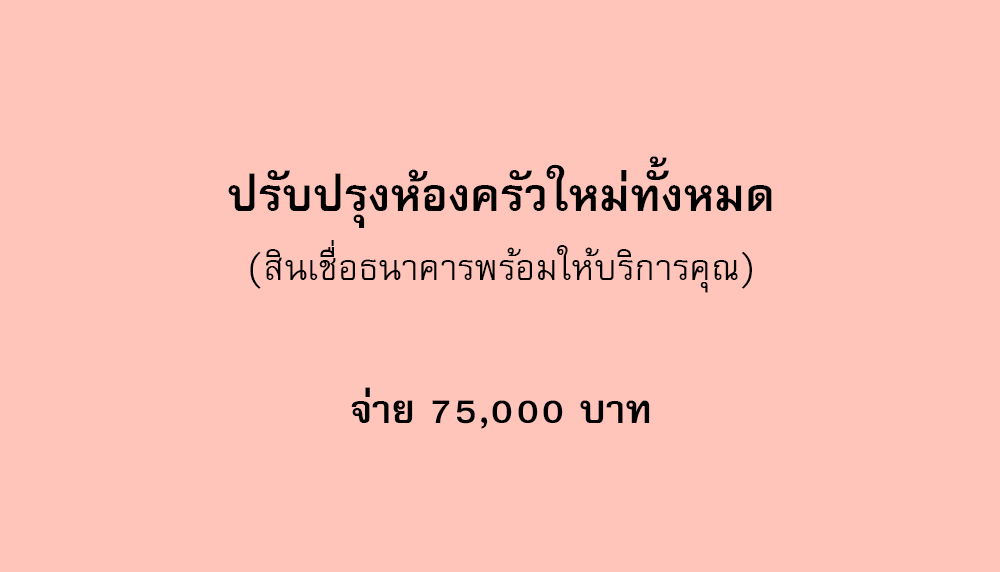
<style>
.page{position:relative;width:1000px;height:572px;background:#ffc4ba}
.page>*{position:absolute;margin:0}
.t1{font:64px "FreesiaUPCBold";color:#000000}
.t2{font:50px "FreesiaUPC";color:#000000}
.t3{font:56px "FreesiaUPCBold";color:#000000}
</style>
<div class="page">
<p class="t1" style="left:228px;top:156px;width:544px;height:72px">ปรับปรุงห้องครัวใหม่ทั้งหมด</p>
<p class="t2" style="left:250px;top:240px;width:502px;height:53px">(สินเชื่อธนาคารพร้อมให้บริการคุณ)</p>
<p class="t3" style="left:351px;top:387px;width:299px;height:42px">จ่าย 75,000 บาท</p>
</div>
